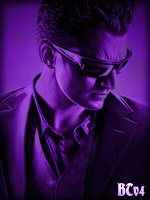
<style>
.page{position:relative;width:150px;height:200px}
.page>*{position:absolute;margin:0}
.t1{font:16px "BradleyGratis"}
</style>
<div class="page">
<p class="t1" style="left:117px;top:183px;width:28px;height:14px">BTv4</p>
</div>
